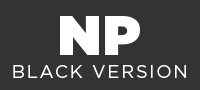
<style>
.page{position:relative;width:200px;height:90px;background:#333333}
.page>*{position:absolute;margin:0}
.t1{font:18px "Gotham-Book";letter-spacing:0.1em;color:#ffffff;text-transform:uppercase}
</style>
<div class="page">
<p class="t1" style="left:13px;top:65px;width:173px;height:13px">Black version</p>
</div>
